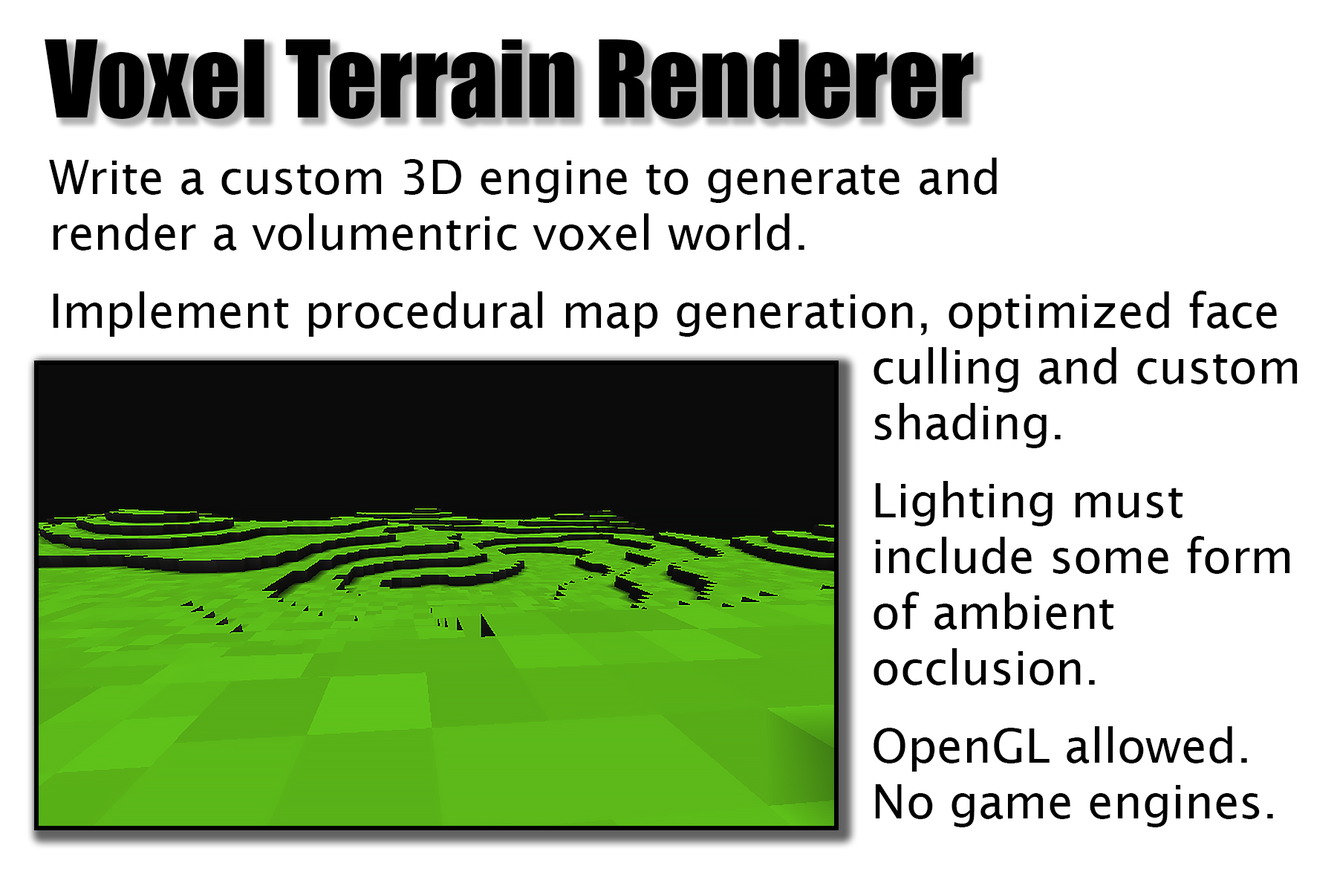
<style>
.page{position:relative;width:1337px;height:892px;background:#ffffff}
.page>*{position:absolute;margin:0}
.t1{font:99.1px "Impact";color:#000000}
.t2{font:46.4px "LucidaSans";color:#000000}
</style>
<div class="page">
<p class="t1" style="left:45px;top:39px;width:929px;height:80px">Voxel Terrain Renderer</p>
<p class="t2" style="left:49px;top:158px;width:1249px;height:669px">Write a custom 3D engine to generate and<br>render a volumentric voxel world. <br><br>Implement procedural map generation, optimized face<br>                                                        culling and custom<br>                                                        shading. <br><br>                                                        Lighting must <br>                                                        include some form<br>                                                        of ambient <br>                                                        occlusion.<br><br>                                                        OpenGL allowed.<br>                                                        No game engines.</p>
</div>
